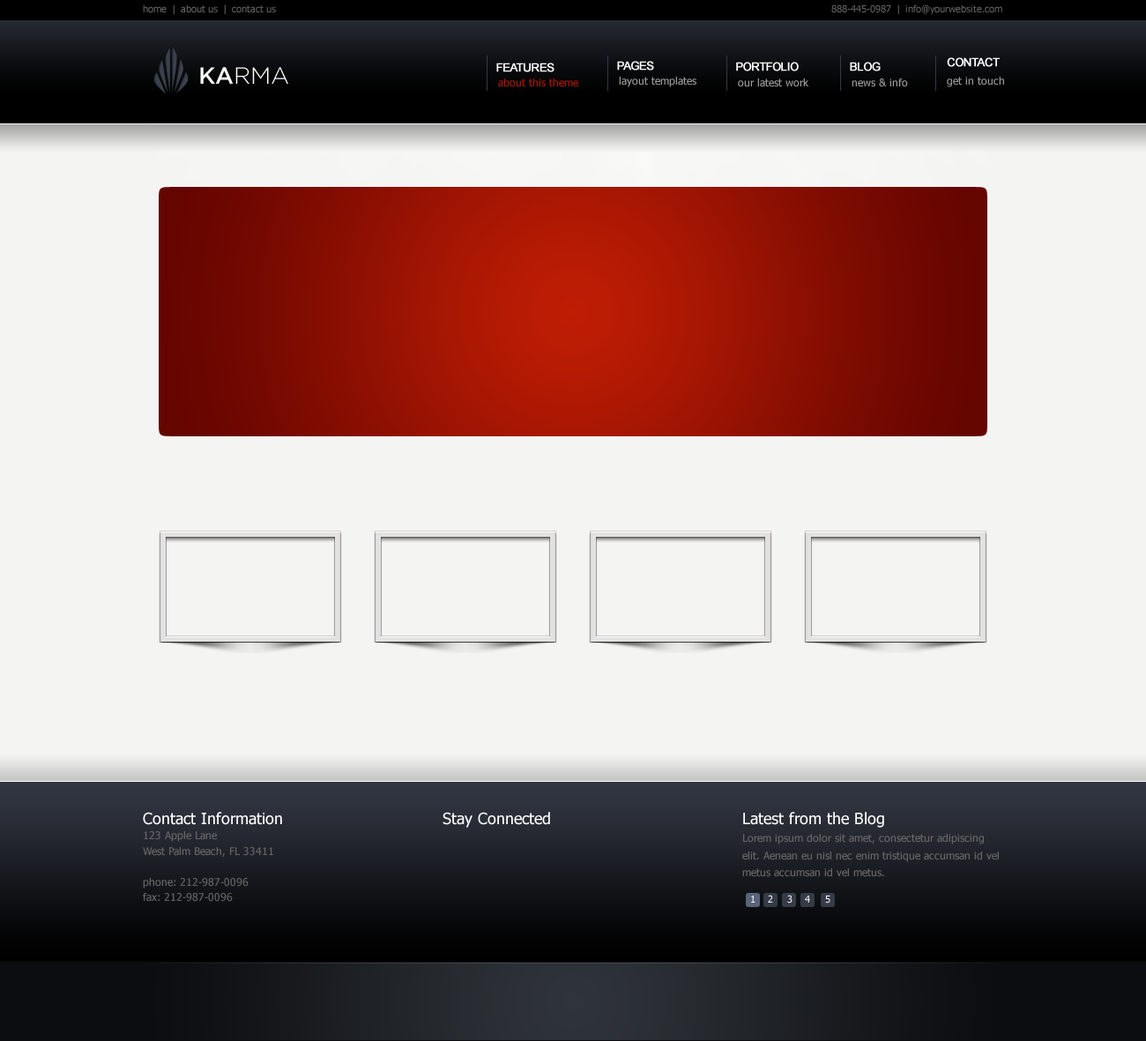
<style>
.page{position:relative;width:1146px;height:1041px;background:#f4f4f2}
.page>*{position:absolute;margin:0}
.t1{font:9.7px "Tahoma";color:#666666}
.t2{font:11.5px "ArialMT";letter-spacing:-0.05em;color:#ffffff;font-weight:bold}
.t3{font:23.2px "Gotham-Light";color:#ffffff}
.t4{font:23.2px "Gotham-Medium";color:#ffffff}
.t5{font:10.6px "Tahoma";color:#999999}
.t6{font:10.6px "Tahoma";color:#a61603}
.t7{font:10.6px/15.4px "Tahoma";color:#666666}
.t8{font:15.9px/23.2px "Tahoma";color:#ffffff}
.t9{font:15.9px "Tahoma";color:#ffffff}
.t10{font:10.6px/17.6px "Tahoma";color:#666666}
.t11{font:9.7px "Tahoma";color:#ffffff}
</style>
<div class="page">
<p class="t1" style="left:143px;top:4px;width:133px;height:10px">home  |  about us  |  contact us</p>
<p class="t1" style="left:831px;top:4px;width:171px;height:11px">888-445-0987  |  info@yourwebsite.com</p>
<p class="t2" style="left:496px;top:63px;width:58px;height:9px">FEATURES</p>
<p class="t2" style="left:617px;top:61px;width:37px;height:10px">PAGES</p>
<p class="t2" style="left:736px;top:62px;width:62px;height:9px">PORTFOLIO</p>
<p class="t2" style="left:850px;top:62px;width:30px;height:9px">BLOG</p>
<p class="t2" style="left:947px;top:57px;width:52px;height:10px">CONTACT</p>
<p class="t3" style="left:200px;top:67px;width:88px;height:17px"><span class="t4">KA</span>RMA</p>
<p class="t5" style="left:619px;top:77px;width:77px;height:10px">layout templates</p>
<p class="t5" style="left:947px;top:77px;width:57px;height:10px">get in touch</p>
<p class="t6" style="left:498px;top:78px;width:80px;height:9px">about this theme</p>
<p class="t5" style="left:738px;top:78px;width:71px;height:9px">our latest work</p>
<p class="t5" style="left:851px;top:78px;width:57px;height:9px">news &amp; info</p>
<p class="t7" style="left:143px;top:812px;width:139px;height:90px"><span class="t8">Contact Information</span><br>123 Apple Lane<br>West Palm Beach, FL 33411<br><br>phone: 212-987-0096<br>fax: 212-987-0096</p>
<p class="t9" style="left:442px;top:812px;width:108px;height:16px">Stay Connected</p>
<p class="t10" style="left:742px;top:812px;width:257px;height:65px"><span class="t8">Latest from the Blog<br></span>Lorem ipsum dolor sit amet, consectetur adipiscing elit. Aenean eu nisl nec enim tristique accumsan id vel metus accumsan id vel metus.</p>
<p class="t11" style="left:751px;top:895px;width:4px;height:7px">1</p>
<p class="t11" style="left:768px;top:895px;width:5px;height:7px">2</p>
<p class="t11" style="left:787px;top:895px;width:5px;height:8px">3</p>
<p class="t11" style="left:805px;top:895px;width:5px;height:7px">4</p>
<p class="t11" style="left:825px;top:895px;width:5px;height:8px">5</p>
</div>
